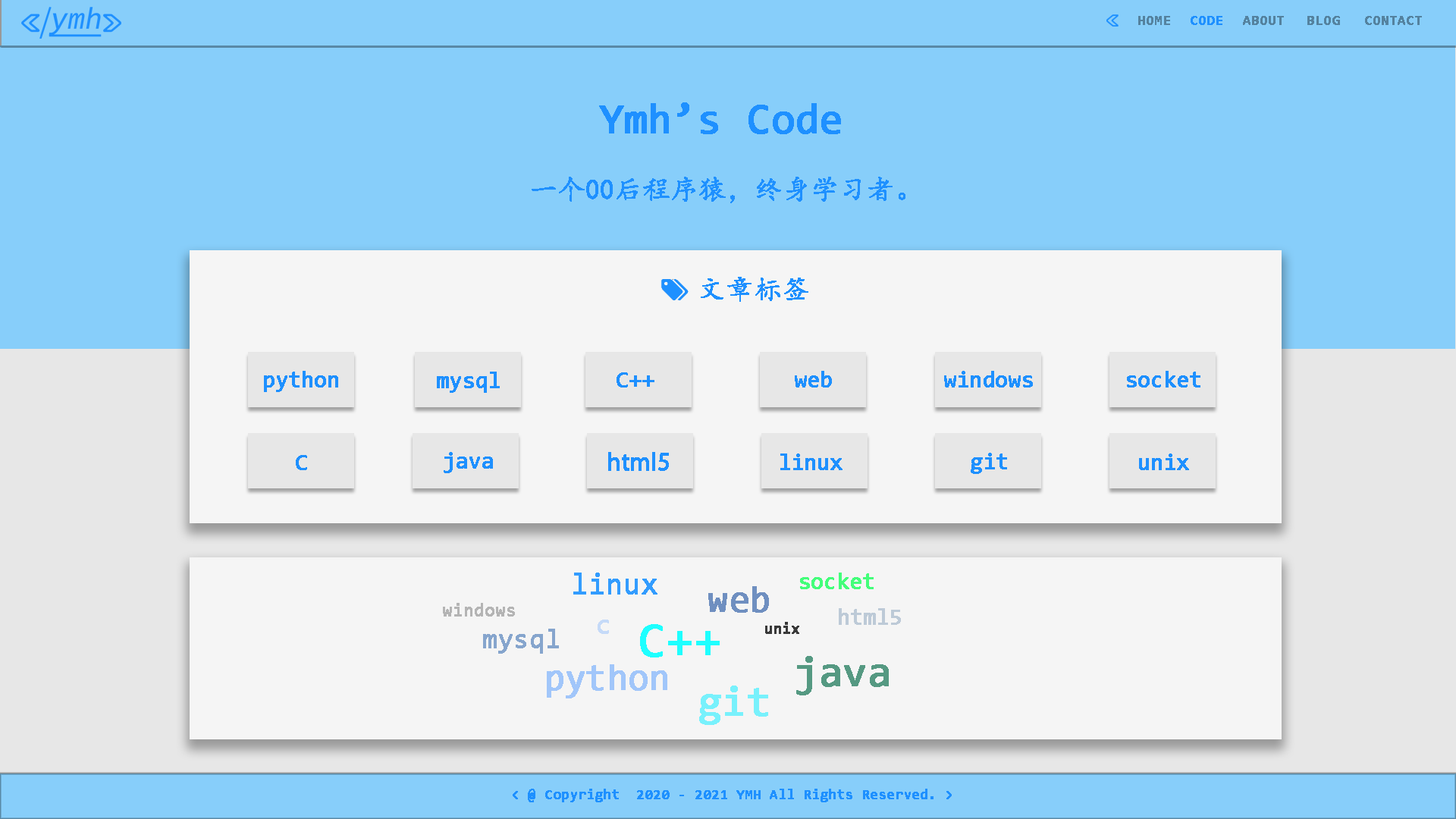
<style>
.page{position:relative;width:1456px;height:819px;background:#87cefa}
.page>*{position:absolute;margin:0}
.t1{font:13.6px "Consolas";color:#54829f;font-weight:bold}
.t2{font:13.6px "Consolas";color:#1e90ff;font-weight:bold}
.t3{font:42.5px "Consolas";color:#1e90ff;font-weight:bold}
.t4{font:27.3px "KaiTi";color:#1e90ff;font-weight:bold}
.t5{font:22.7px "Consolas";color:#1e90ff;font-weight:bold}
.t6{font:22.7px "AdobeHeitiStd-Regular";color:#1e90ff;font-weight:bold}
.t7{font:30.3px "Consolas";color:#329cfe;font-weight:bold}
.t8{font:22.7px "Consolas";color:#43fe7a;font-weight:bold}
.t9{font:36.4px "Consolas";color:#6f8fc0;font-weight:bold}
.t10{font:18.2px "Consolas";color:#b4b4b4;font-weight:bold}
.t11{font:22.7px "Consolas";color:#bdcad7;font-weight:bold}
.t12{font:27.3px "Consolas";color:#86a5cd;font-weight:bold}
.t13{font:27.3px "Consolas";color:#c5daf8;font-weight:bold}
.t14{font:48.5px "Consolas";color:#1effff;font-weight:bold}
.t15{font:15.2px "Consolas";color:#393939;font-weight:bold}
.t16{font:36.4px "Consolas";color:#a1c6fa;font-weight:bold}
.t17{font:42.5px "Consolas";color:#559982;font-weight:bold}
.t18{font:42.5px "Consolas";color:#78f1fc;font-weight:bold}
</style>
<div class="page">
<p class="t1" style="left:1138px;top:16px;width:32px;height:9px">HOME</p>
<p class="t2" style="left:1191px;top:16px;width:31px;height:9px">CODE</p>
<p class="t1" style="left:1243px;top:16px;width:41px;height:9px">ABOUT</p>
<p class="t1" style="left:1307px;top:16px;width:33px;height:9px">BLOG</p>
<p class="t1" style="left:1365px;top:16px;width:57px;height:9px">CONTACT</p>
<p class="t3" style="left:599px;top:102px;width:242px;height:32px">Ymh’s Code</p>
<p class="t4" style="left:532px;top:177px;width:373px;height:26px">一个00后程序猿，终身学习者。</p>
<p class="t4" style="left:701px;top:277px;width:107px;height:25px">文章标签</p>
<p class="t5" style="left:264px;top:371px;width:74px;height:21px">python</p>
<p class="t5" style="left:437px;top:372px;width:63px;height:21px">mysql</p>
<p class="t5" style="left:617px;top:372px;width:37px;height:16px">C++</p>
<p class="t5" style="left:795px;top:371px;width:37px;height:17px">web</p>
<p class="t5" style="left:944px;top:371px;width:89px;height:17px">windows</p>
<p class="t5" style="left:1127px;top:371px;width:73px;height:17px">socket</p>
<p class="t5" style="left:296px;top:455px;width:11px;height:15px">C</p>
<p class="t5" style="left:444px;top:452px;width:49px;height:21px">java</p>
<p class="t6" style="left:608px;top:452px;width:61px;height:19px">html5</p>
<p class="t5" style="left:780px;top:453px;width:62px;height:17px">linux</p>
<p class="t5" style="left:971px;top:453px;width:36px;height:21px">git</p>
<p class="t5" style="left:1139px;top:453px;width:50px;height:17px">unix</p>
<p class="t7" style="left:573px;top:573px;width:84px;height:22px">linux</p>
<p class="t8" style="left:800px;top:573px;width:74px;height:16px">socket</p>
<p class="t9" style="left:708px;top:586px;width:61px;height:27px">web</p>
<p class="t10" style="left:443px;top:603px;width:72px;height:14px">windows</p>
<p class="t11" style="left:839px;top:608px;width:62px;height:17px">html5</p>
<p class="t12" style="left:483px;top:629px;width:76px;height:25px">mysql</p>
<p class="t13" style="left:598px;top:620px;width:11px;height:14px">c</p>
<p class="t14" style="left:640px;top:624px;width:80px;height:33px">C++</p>
<p class="t15" style="left:765px;top:622px;width:34px;height:12px">unix</p>
<p class="t16" style="left:547px;top:664px;width:120px;height:34px">python</p>
<p class="t17" style="left:796px;top:656px;width:93px;height:39px">java</p>
<p class="t18" style="left:699px;top:686px;width:69px;height:39px">git</p>
<p class="t2" style="left:513px;top:789px;width:439px;height:13px">&lt; @ Copyright  2020 - 2021 YMH All Rights Reserved. &gt;</p>
</div>
